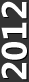
<style>
.page{position:relative;width:29px;height:82px;background:#333333}
.page>*{position:absolute;margin:0}
.t1{font:35px "SegoeUI-Bold";color:#ffffff}
</style>
<div class="page">
<p class="t1" style="left:1px;top:1px;width:26px;height:79px;rotate:-90deg">2012</p>
</div>
